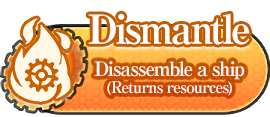
<style>
.page{position:relative;width:270px;height:117px;background:#ffffff}
.page>*{position:absolute;margin:0}
.t1{font:40px "RyuminPro-ExBold";letter-spacing:-0.08em;color:#ffffff}
.t2{font:16px/17px "RyuminPro-ExBold";letter-spacing:-0.08em;color:#fff6f1}
.t3{font:20px/17px "RyuminPro-ExBold";letter-spacing:-0.08em;color:#fff6f1}
</style>
<div class="page">
<p class="t1" style="left:88px;top:13px;width:162px;height:32px">Dismantle</p>
<p class="t2" style="left:94px;top:61px;width:151px;height:35px;text-align:center"><span class="t3">Disassemble a ship<br></span>(Returns resources)</p>
</div>
